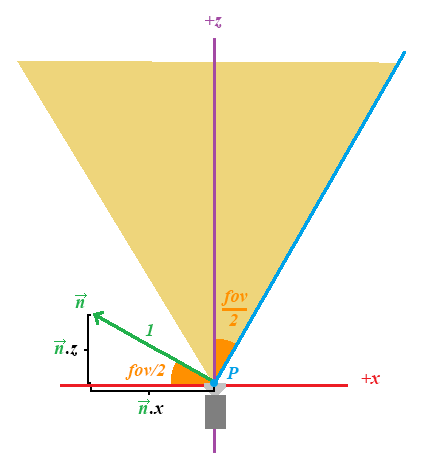
<style>
.page{position:relative;width:423px;height:472px;background:#ffffff}
.page>*{position:absolute;margin:0}
.t1{font:18.7px "TimesNewRomanPS-BoldItalicMT";color:#a349a4}
.t2{font:18.7px "TimesNewRomanPS-BoldItalicMT";color:#22b14c}
.t3{font:18.7px "TimesNewRomanPS-BoldItalicMT";color:#000000}
.t4{font:18.7px "TimesNewRomanPS-BoldItalicMT";color:#ff9000}
.t5{font:18.7px "TimesNewRomanPS-BoldItalicMT";color:#00a2e8}
.t6{font:18.7px "TimesNewRomanPS-BoldItalicMT";color:#ed1c24}
</style>
<div class="page">
<p class="t1" style="left:205px;top:16px;width:17px;height:12px">+z</p>
<p class="t2" style="left:145px;top:324px;width:8px;height:12px">1</p>
<p class="t3" style="left:65px;top:345px;width:13px;height:11px">.z</p>
<p class="t4" style="left:125px;top:364px;width:41px;height:16px">fov/2</p>
<p class="t5" style="left:226px;top:367px;width:13px;height:12px">P</p>
<p class="t6" style="left:361px;top:374px;width:19px;height:10px">+x</p>
<p class="t3" style="left:149px;top:405px;width:15px;height:9px">.x</p>
</div>
